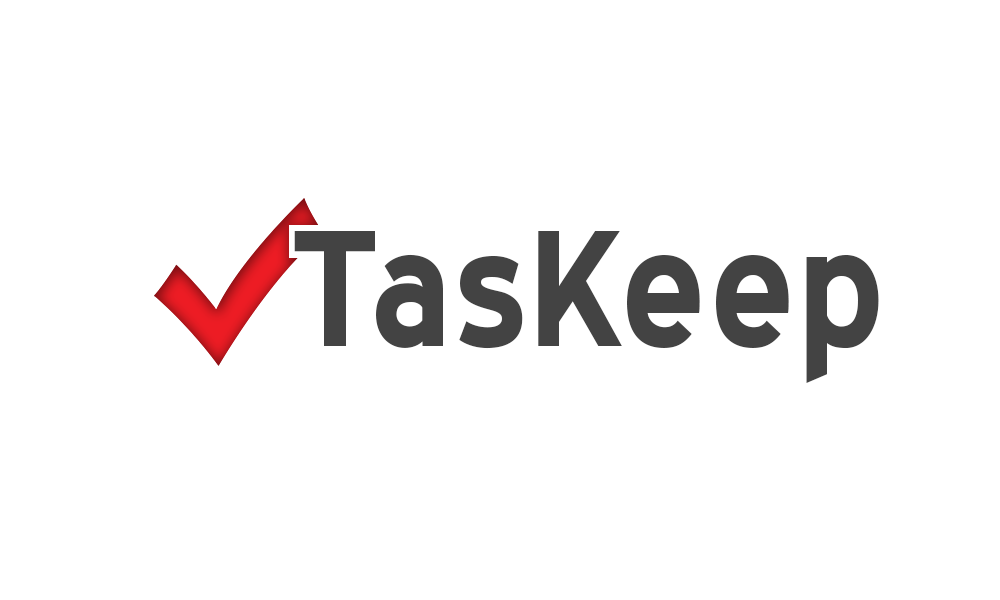
<style>
.page{position:relative;width:1000px;height:600px;background:#ffffff}
.page>*{position:absolute;margin:0}
.t1{font:160px "BlueHighway-Bold";letter-spacing:0.01em;color:#3e3e3e}
</style>
<div class="page">
<p class="t1" style="left:294px;top:231px;width:585px;height:152px">TasKeep</p>
</div>
